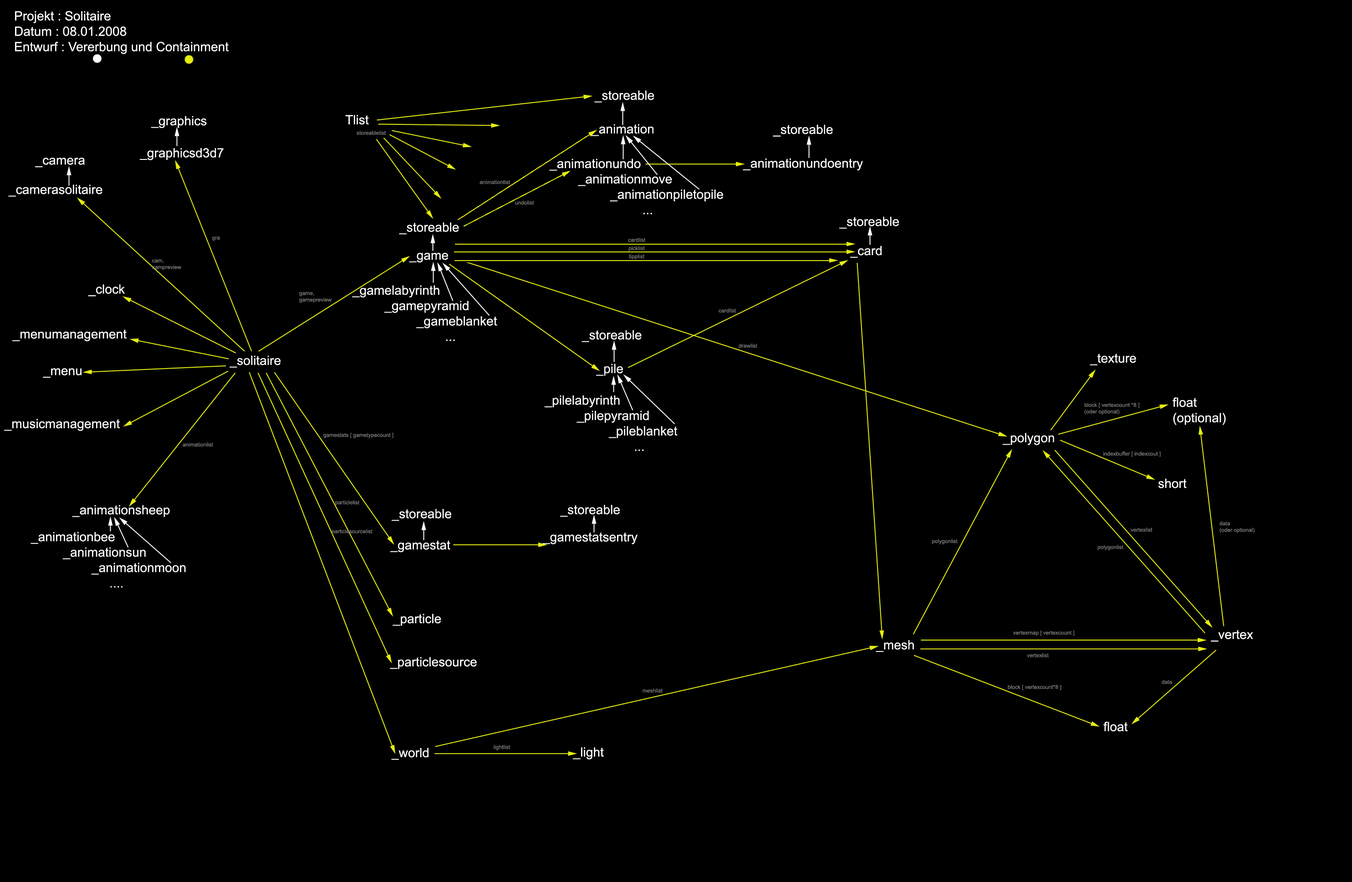
<style>
.page{position:relative;width:1352px;height:882px;background:#000000}
.page>*{position:absolute;margin:0}
.t1{font:12.8px "ArialMT";color:#ffffff}
.t2{font:5.5px "ArialMT";color:#7f7f7f}
</style>
<div class="page">
<p class="t1" style="left:15px;top:11px;width:214px;height:43px">Projekt : Solitaire<br>Datum : 08.01.2008<br>Entwurf : Vererbung und Containment</p>
<p class="t1" style="left:594px;top:90px;width:61px;height:12px">_storeable</p>
<p class="t1" style="left:151px;top:116px;width:56px;height:12px">_graphics</p>
<p class="t1" style="left:345px;top:115px;width:24px;height:10px">Tlist</p>
<p class="t1" style="left:591px;top:124px;width:63px;height:12px">_animation</p>
<p class="t1" style="left:773px;top:124px;width:60px;height:13px">_storeable</p>
<p class="t2" style="left:357px;top:131px;width:29px;height:4px">storeablelist</p>
<p class="t1" style="left:139px;top:148px;width:85px;height:12px">_graphicsd3d7</p>
<p class="t1" style="left:35px;top:158px;width:50px;height:9px">_camera</p>
<p class="t1" style="left:549px;top:159px;width:174px;height:56px">_animationundo<br>        _animationmove<br>                 _animationpiletopile<br>                          ...</p>
<p class="t1" style="left:743px;top:158px;width:120px;height:13px">_animationundoentry</p>
<p class="t1" style="left:8px;top:184px;width:94px;height:13px">_camerasolitaire</p>
<p class="t2" style="left:480px;top:180px;width:30px;height:4px">animationlist</p>
<p class="t2" style="left:515px;top:200px;width:19px;height:5px">undolist</p>
<p class="t1" style="left:839px;top:216px;width:60px;height:13px">_storeable</p>
<p class="t1" style="left:399px;top:222px;width:60px;height:13px">_storeable</p>
<p class="t2" style="left:212px;top:236px;width:8px;height:5px">gra</p>
<p class="t2" style="left:628px;top:238px;width:18px;height:4px">cardlist</p>
<p class="t2" style="left:629px;top:246px;width:16px;height:5px">picklist</p>
<p class="t1" style="left:850px;top:245px;width:32px;height:13px">_card</p>
<p class="t1" style="left:409px;top:253px;width:39px;height:9px">_game</p>
<p class="t2" style="left:629px;top:254px;width:15px;height:6px">tipplist</p>
<p class="t2" style="left:152px;top:259px;width:29px;height:11px">cam,<br>campreview</p>
<p class="t1" style="left:88px;top:284px;width:37px;height:13px">_clock</p>
<p class="t2" style="left:299px;top:292px;width:33px;height:11px">game,<br>gamepreview</p>
<p class="t1" style="left:352px;top:285px;width:145px;height:56px">_gamelabyrinth<br>         _gamepyramid<br>                  _gameblanket<br>                          ...</p>
<p class="t2" style="left:719px;top:308px;width:17px;height:4px">cardlist</p>
<p class="t1" style="left:12px;top:329px;width:115px;height:12px">_menumanagement</p>
<p class="t1" style="left:582px;top:330px;width:60px;height:12px">_storeable</p>
<p class="t2" style="left:739px;top:343px;width:18px;height:5px">drawlist</p>
<p class="t1" style="left:1090px;top:353px;width:46px;height:12px">_texture</p>
<p class="t1" style="left:230px;top:355px;width:51px;height:13px">_solitaire</p>
<p class="t1" style="left:596px;top:363px;width:27px;height:13px">_pile</p>
<p class="t1" style="left:43px;top:368px;width:39px;height:10px">_menu</p>
<p class="t1" style="left:544px;top:395px;width:134px;height:56px">_pilelabyrinth<br>         _pilepyramid<br>                  _pileblanket<br>                         ...</p>
<p class="t1" style="left:1173px;top:397px;width:53px;height:28px">float<br>(optional)</p>
<p class="t2" style="left:1084px;top:403px;width:56px;height:11px">block [ vertexcount *8 ]<br>(oder optional)</p>
<p class="t1" style="left:4px;top:419px;width:116px;height:12px">_musicmanagement</p>
<p class="t2" style="left:323px;top:433px;width:71px;height:5px">gamestats [ gametypecount ]</p>
<p class="t1" style="left:1002px;top:433px;width:52px;height:12px">_polygon</p>
<p class="t2" style="left:183px;top:442px;width:30px;height:5px">animationlist</p>
<p class="t2" style="left:1103px;top:451px;width:58px;height:6px">indexbuffer [ indexcout ]</p>
<p class="t1" style="left:1158px;top:478px;width:29px;height:10px">short</p>
<p class="t1" style="left:72px;top:505px;width:98px;height:12px">_animationsheep</p>
<p class="t2" style="left:335px;top:500px;width:25px;height:6px">particlelist</p>
<p class="t1" style="left:392px;top:509px;width:59px;height:12px">_storeable</p>
<p class="t1" style="left:560px;top:505px;width:60px;height:12px">_storeable</p>
<p class="t2" style="left:1220px;top:521px;width:35px;height:12px">data<br>(oder optional)</p>
<p class="t1" style="left:31px;top:532px;width:155px;height:56px">_animationbee<br>         _animationsun<br>                 _animationmoon<br>                      ....</p>
<p class="t2" style="left:332px;top:529px;width:41px;height:5px">particlesourcelist</p>
<p class="t1" style="left:542px;top:532px;width:96px;height:12px">_gamestatsentry</p>
<p class="t2" style="left:1131px;top:527px;width:22px;height:5px">vertexlist</p>
<p class="t1" style="left:390px;top:540px;width:60px;height:12px">_gamestat</p>
<p class="t2" style="left:932px;top:539px;width:26px;height:5px">polygonlist</p>
<p class="t2" style="left:1098px;top:545px;width:26px;height:5px">polygonlist</p>
<p class="t1" style="left:393px;top:614px;width:48px;height:12px">_particle</p>
<p class="t1" style="left:1211px;top:629px;width:42px;height:13px">_vertex</p>
<p class="t1" style="left:876px;top:640px;width:38px;height:12px">_mesh</p>
<p class="t2" style="left:1013px;top:630px;width:61px;height:6px">vertexmap [ vertexcount ]</p>
<p class="t2" style="left:1027px;top:653px;width:22px;height:4px">vertexlist</p>
<p class="t1" style="left:390px;top:657px;width:87px;height:12px">_particlesource</p>
<p class="t2" style="left:643px;top:688px;width:20px;height:5px">meshlist</p>
<p class="t2" style="left:1008px;top:685px;width:54px;height:5px">block [ vertexcount*8 ]</p>
<p class="t2" style="left:1162px;top:680px;width:10px;height:4px">data</p>
<p class="t1" style="left:1104px;top:721px;width:24px;height:10px">float</p>
<p class="t1" style="left:391px;top:747px;width:38px;height:13px">_world</p>
<p class="t2" style="left:494px;top:745px;width:17px;height:5px">lightlist</p>
<p class="t1" style="left:573px;top:747px;width:31px;height:12px">_light</p>
</div>
